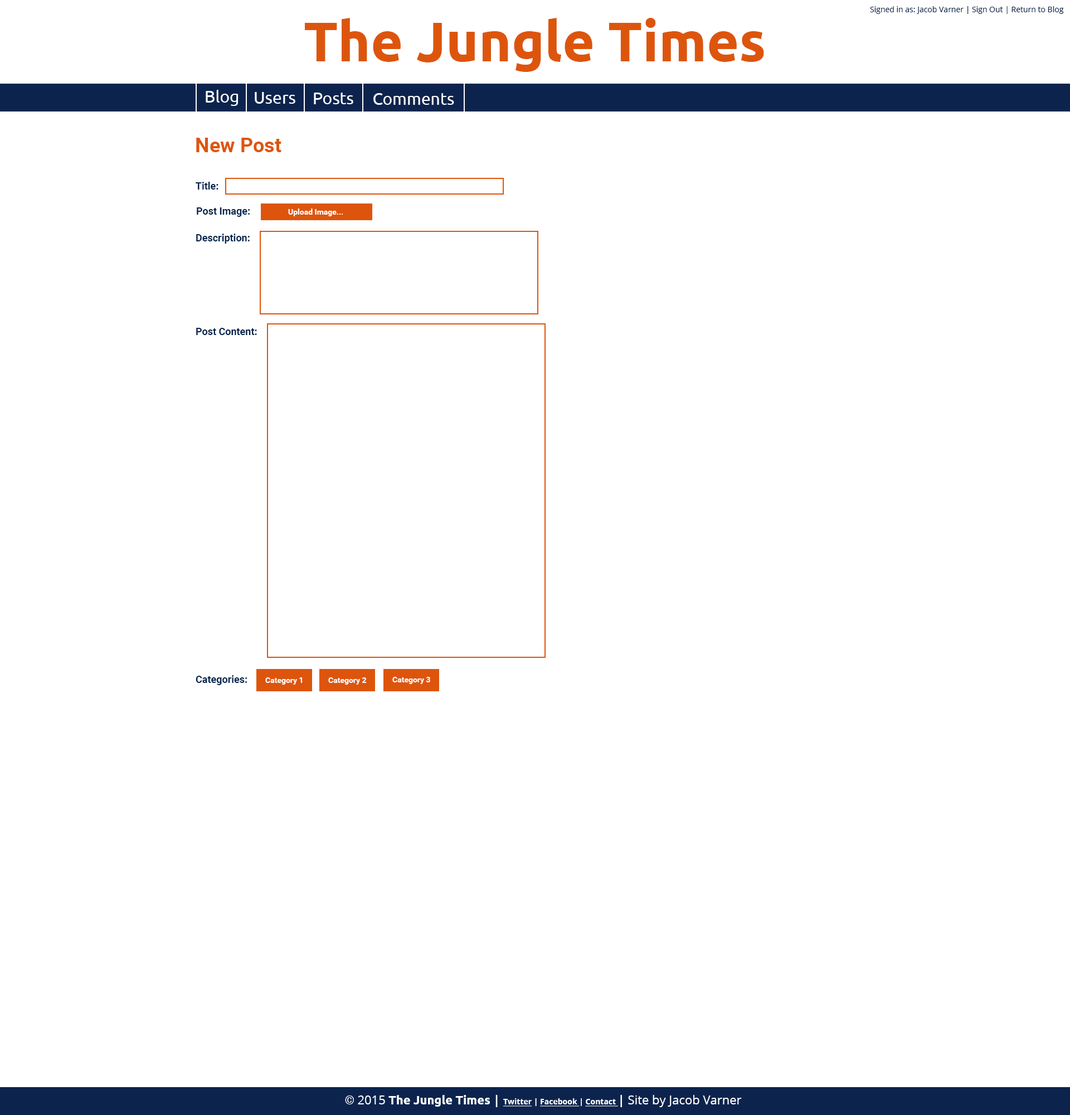
<style>
.page{position:relative;width:1070px;height:1115px;background:#ffffff}
.page>*{position:absolute;margin:0}
.t1{font:55.7px "Ubuntu-Bold";color:#dd550c}
.t2{font:7.8px "OpenSans";color:#0c244d}
.t3{font:16.7px "Ubuntu";color:#ffffff}
.t4{font:20.1px "Roboto-Bold";color:#dd550c}
.t5{font:10px "Roboto-Bold";color:#03244d}
.t6{font:7.8px "Roboto-Bold";color:#ffffff}
.t7{font:12.3px "OpenSans";color:#ffffff}
.t8{font:12.3px "Roboto-Bold";color:#ffffff}
.t9{font:12.3px "Ubuntu-Bold";color:#ffffff}
.t10{font:12.3px "OpenSans-Bold";color:#ffffff}
.t11{font:7.8px "OpenSans-Bold";color:#ffffff;text-decoration:underline}
.t12{font:7.8px "OpenSans-Bold";color:#ffffff}
</style>
<div class="page">
<p class="t1" style="left:305px;top:18px;width:459px;height:54px">The Jungle Times</p>
<p class="t2" style="left:870px;top:6px;width:194px;height:8px">Signed in as: Jacob Varner | Sign Out | Return to Blog</p>
<p class="t3" style="left:206px;top:90px;width:32px;height:16px">Blog</p>
<p class="t3" style="left:255px;top:92px;width:40px;height:12px">Users</p>
<p class="t3" style="left:314px;top:93px;width:39px;height:11px">Posts</p>
<p class="t3" style="left:373px;top:93px;width:81px;height:12px">Comments</p>
<p class="t4" style="left:196px;top:138px;width:85px;height:14px">New Post</p>
<p class="t5" style="left:196px;top:182px;width:22px;height:7px">Title:</p>
<p class="t5" style="left:197px;top:207px;width:53px;height:10px">Post Image:</p>
<p class="t6" style="left:288px;top:208px;width:55px;height:8px">Upload Image...</p>
<p class="t5" style="left:196px;top:233px;width:54px;height:11px">Description:</p>
<p class="t5" style="left:196px;top:328px;width:61px;height:7px">Post Content:</p>
<p class="t5" style="left:196px;top:675px;width:51px;height:10px">Categories:</p>
<p class="t6" style="left:265px;top:677px;width:38px;height:7px">Category 1</p>
<p class="t6" style="left:328px;top:677px;width:39px;height:7px">Category 2</p>
<p class="t6" style="left:392px;top:677px;width:38px;height:7px">Category 3</p>
<p class="t7" style="left:345px;top:1094px;width:397px;height:13px"><span class="t8">© </span>2015 <span class="t9">The Jungle Times </span><span class="t10">| </span><span class="t11">Twitter</span><span class="t12"> | </span><span class="t11">Facebook </span><span class="t12">| </span><span class="t11">Contact </span><span class="t10">| </span>Site by Jacob Varner</p>
</div>
